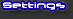
<style>
.page{position:relative;width:73px;height:19px;background:#333333}
.page>*{position:absolute;margin:0}
.t1{font:10px "ThundergodII";color:#ffffff}
</style>
<div class="page">
<p class="t1" style="left:3px;top:2px;width:62px;height:8px">Settings</p>
</div>
